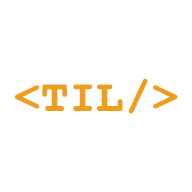
<style>
.page{position:relative;width:192px;height:192px;background:#ffffff}
.page>*{position:absolute;margin:0}
.t1{font:45.8px "Courier-Bold";color:#f09d19}
</style>
<div class="page">
<p class="t1" style="left:14px;top:78px;width:164px;height:36px">&lt;TIL/&gt;</p>
</div>
